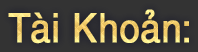
<style>
.page{position:relative;width:198px;height:52px;background:#333333}
.page>*{position:absolute;margin:0}
.t1{font:40.3px "UTM-Helve";color:#f9d574;font-weight:bold;scale:0.9 1}
</style>
<div class="page">
<p class="t1" style="left:8px;top:9px;width:181px;height:35px">Tài Khoản:</p>
</div>
